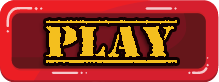
<style>
.page{position:relative;width:219px;height:82px}
.page>*{position:absolute;margin:0}
.t1{font:44.4px "TopSecret-Bold";color:#f4bf1e;scale:1.14 1}
</style>
<div class="page">
<p class="t1" style="left:46px;top:20px;width:131px;height:43px">Play</p>
</div>
